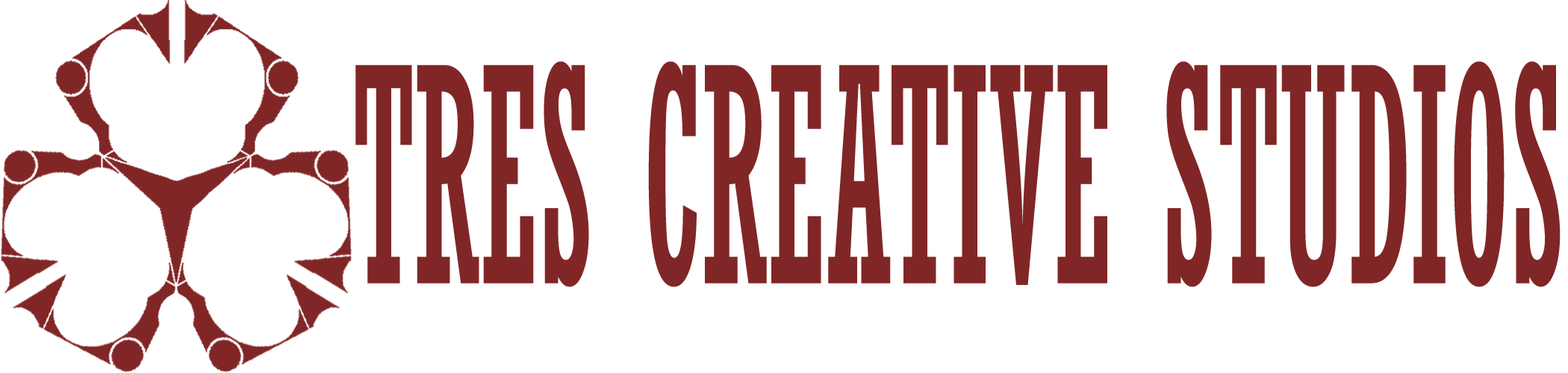
<style>
.page{position:relative;width:1568px;height:373px;background:#ffffff}
.page>*{position:absolute;margin:0}
.t1{font:296.4px "Rockwell-Condensed";color:#812626;scale:0.49 1}
</style>
<div class="page">
<p class="t1" style="left:355px;top:61px;width:1206px;height:226px">TRES CREATIVE STUDIOS</p>
</div>
